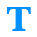
<style>
.page{position:relative;width:37px;height:37px;background:#ffffff}
.page>*{position:absolute;margin:0}
.t1{font:36px "Baskerville-Bold";color:#0090ff}
</style>
<div class="page">
<p class="t1" style="left:7px;top:7px;width:24px;height:24px">T</p>
</div>
